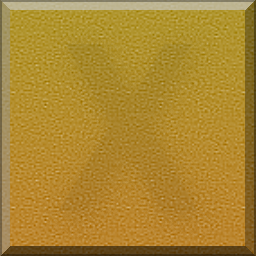
<style>
.page{position:relative;width:256px;height:256px}
.page>*{position:absolute;margin:0}
.t1{font:250px "FranklinGothic-Medium";color:#aa832b}
</style>
<div class="page">
<p class="t1" style="left:58px;top:44px;width:140px;height:167px">X</p>
</div>
